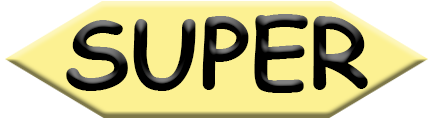
<style>
.page{position:relative;width:433px;height:119px;background:#fcf192}
.page>*{position:absolute;margin:0}
.t1{font:95.4px "ComicSansMS-Bold";color:#000000}
</style>
<div class="page">
<p class="t1" style="left:66px;top:14px;width:302px;height:79px">SUPER</p>
</div>
